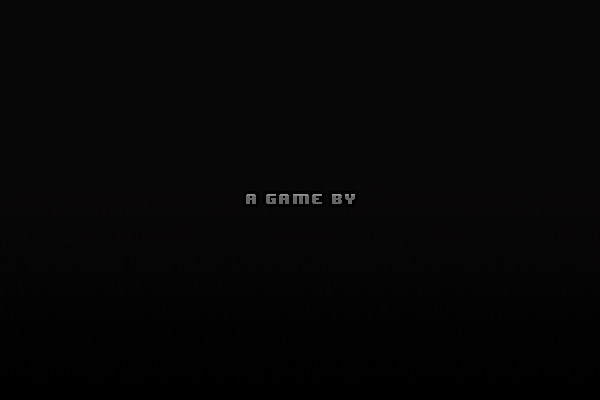
<style>
.page{position:relative;width:600px;height:400px;background:#080707}
.page>*{position:absolute;margin:0}
.t1{font:12.4px "8BITWONDERNominal";letter-spacing:0.1em;color:#656565}
</style>
<div class="page">
<p class="t1" style="left:246px;top:194px;width:109px;height:10px">A GAME BY</p>
</div>
